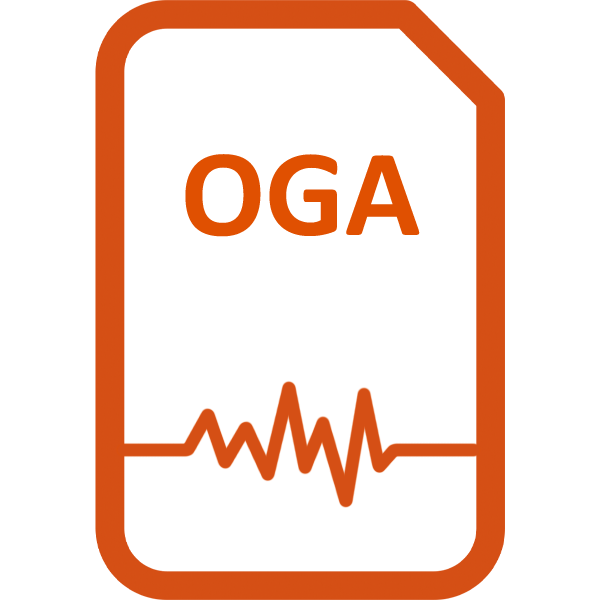
<style>
.page{position:relative;width:600px;height:600px;background:#ffffff}
.page>*{position:absolute;margin:0}
.t1{font:125px "Calibri-Bold";color:#e05001}
</style>
<div class="page">
<p class="t1" style="left:185px;top:154px;width:235px;height:83px">OGA</p>
</div>
